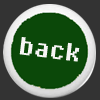
<style>
.page{position:relative;width:100px;height:100px;background:#0b4809}
.page>*{position:absolute;margin:0}
.t1{font:25px "Fixedsys";color:#f5f5f5}
</style>
<div class="page">
<p class="t1" style="left:19px;top:37px;width:61px;height:25px;rotate:7deg">back</p>
</div>
